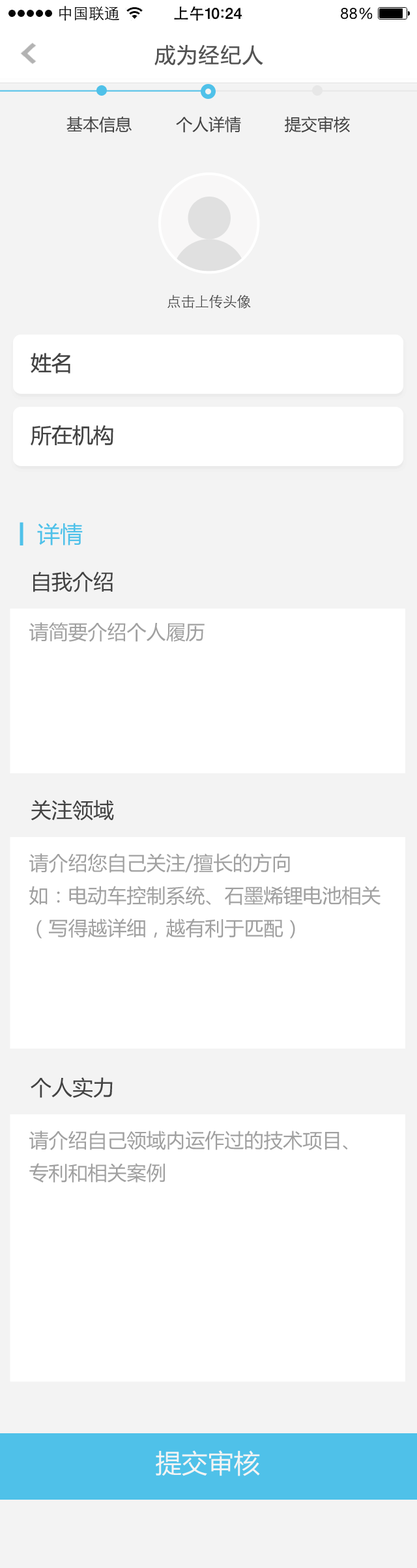
<style>
.page{position:relative;width:417px;height:1568px;background:#ffffff}
.page>*{position:absolute;margin:0}
.t1{font:20.8px "MicrosoftYaHei";letter-spacing:0.05em;color:#535353}
.t2{font:16.3px "MicrosoftYaHei";color:#434343}
.t3{font:14.3px "STXihei";letter-spacing:-0.025em;color:#434343}
.t4{font:20.8px "MicrosoftYaHei";color:#434343}
.t5{font:22.8px "MicrosoftYaHei";color:#4fc1e9}
.t6{font:19.5px "MicrosoftYaHei";color:#a0a0a0}
.t7{font:19.5px/32.5px "MicrosoftYaHei";color:#a0a0a0}
.t8{font:26px "MicrosoftYaHei";color:#f4f4f4}
</style>
<div class="page">
<p class="t1" style="left:154px;top:45px;width:109px;height:21px">成为经纪人</p>
<p class="t2" style="left:66px;top:117px;width:65px;height:16px">基本信息</p>
<p class="t2" style="left:176px;top:117px;width:65px;height:16px">个人详情</p>
<p class="t2" style="left:284px;top:116px;width:66px;height:17px">提交审核</p>
<p class="t3" style="left:167px;top:295px;width:84px;height:14px">点击上传头像</p>
<p class="t4" style="left:31px;top:353px;width:39px;height:21px">姓名</p>
<p class="t4" style="left:31px;top:425px;width:82px;height:21px">所在机构</p>
<p class="t5" style="left:37px;top:523px;width:46px;height:22px">详情</p>
<p class="t4" style="left:33px;top:571px;width:80px;height:21px">自我介绍</p>
<p class="t6" style="left:29px;top:622px;width:175px;height:20px">请简要介绍个人履历</p>
<p class="t4" style="left:31px;top:800px;width:83px;height:21px">关注领域</p>
<p class="t7" style="left:29px;top:853px;width:351px;height:86px">请介绍您自己关注/擅长的方向<br>如：电动车控制系统、石墨烯锂电池相关<br>（写得越详细，越有利于匹配）</p>
<p class="t4" style="left:31px;top:1077px;width:82px;height:21px">个人实力</p>
<p class="t7" style="left:29px;top:1131px;width:319px;height:52px">请介绍自己领域内运作过的技术项目、<br>专利和相关案例</p>
<p class="t8" style="left:156px;top:1450px;width:104px;height:26px">提交审核</p>
</div>
